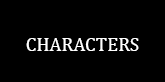
<style>
.page{position:relative;width:165px;height:82px;background:#000000}
.page>*{position:absolute;margin:0}
.t1{font:19.1px "Cambria";color:#ffffff}
</style>
<div class="page">
<p class="t1" style="left:26px;top:38px;width:113px;height:13px">CHARACTERS</p>
</div>
